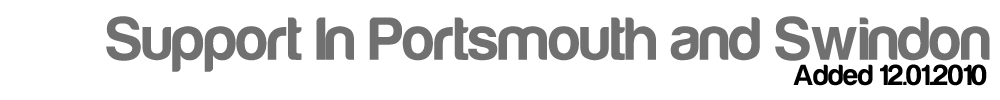
<style>
.page{position:relative;width:1000px;height:100px;background:#ffffff}
.page>*{position:absolute;margin:0}
.t1{font:63px "Harabara-Bold";color:#707070}
.t2{font:30px "Harabara-Bold";color:#000000}
</style>
<div class="page">
<p class="t1" style="left:106px;top:16px;width:884px;height:56px">Support In Portsmouth and Swindon</p>
<p class="t2" style="left:793px;top:64px;width:194px;height:22px">Added 12.01.2010</p>
</div>
